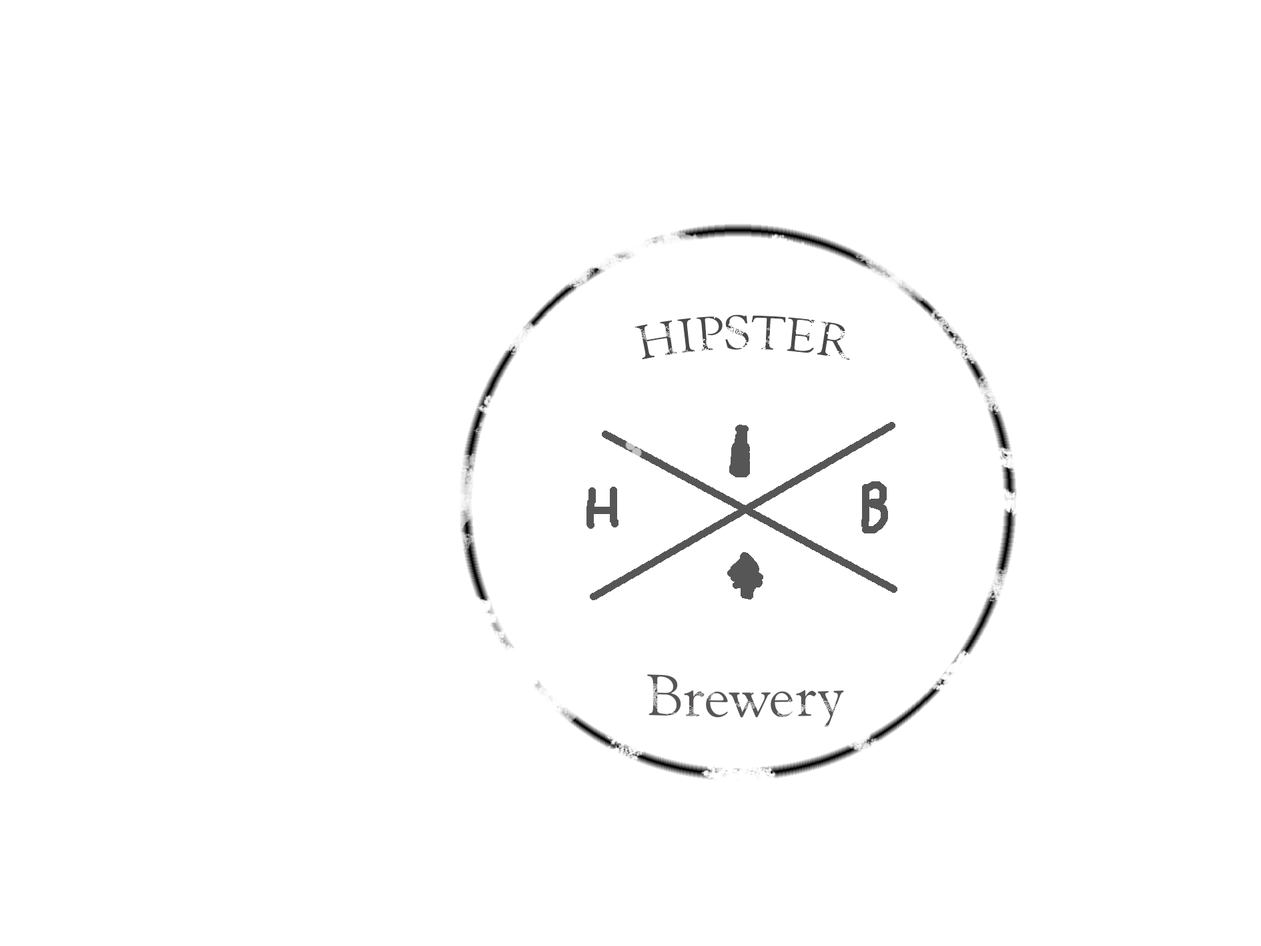
<style>
.page{position:relative;width:1261px;height:946px;background:#ffffff}
.page>*{position:absolute;margin:0}
.t1{font:50px "GoudyOldStyleT-Regular";color:#4a4949}
.t2{font:67.5px "GoudyOldStyleT-Regular";color:#575555;scale:0.93 1}
</style>
<div class="page">
<p class="t1" style="left:635px;top:314px;width:215px;height:46px">HIPSTER</p>
<p class="t2" style="left:647px;top:674px;width:197px;height:53px">Brewery</p>
</div>
